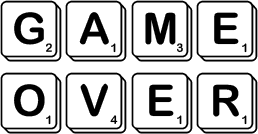
<style>
.page{position:relative;width:258px;height:134px;background:#ffffff}
.page>*{position:absolute;margin:0}
.t1{font:60px "Scramble";color:#000000}
</style>
<div class="page">
<p class="t1" style="left:0px;top:0px;width:258px;height:134px">GAME OVER</p>
</div>
